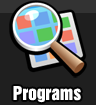
<style>
.page{position:relative;width:96px;height:105px;background:#1f1f1f}
.page>*{position:absolute;margin:0}
.t1{font:17.3px "HelveticaInseratCyr-Upright";color:#ffffff}
</style>
<div class="page">
<p class="t1" style="left:13px;top:86px;width:68px;height:17px">Programs</p>
</div>
